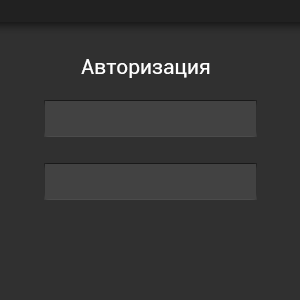
<style>
.page{position:relative;width:300px;height:300px;background:#303030}
.page>*{position:absolute;margin:0}
.t1{font:20.8px "Roboto-Regular";color:#ffffff}
</style>
<div class="page">
<p class="t1" style="left:81px;top:59px;width:129px;height:19px">Авторизация</p>
</div>
